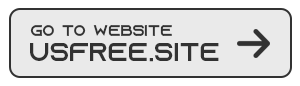
<style>
.page{position:relative;width:300px;height:86px;background:#eaeaea}
.page>*{position:absolute;margin:0}
.t1{font:15.9px "AzonixRegular";color:#323232}
.t2{font:25.6px "AzonixRegular";color:#323232}
</style>
<div class="page">
<p class="t1" style="left:30px;top:25px;width:142px;height:11px">GO TO WEBSITE</p>
<p class="t2" style="left:30px;top:43px;width:189px;height:19px">usfree.site</p>
</div>
